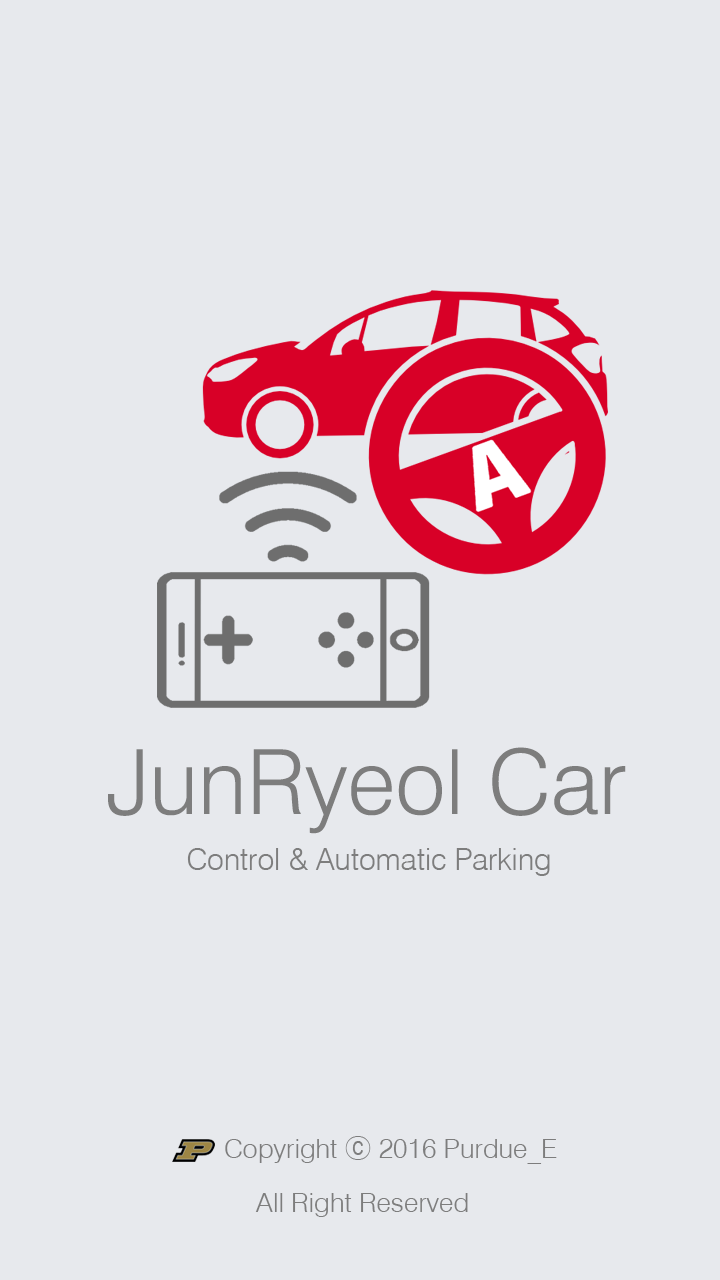
<style>
.page{position:relative;width:720px;height:1280px;background:#e7e9ed}
.page>*{position:absolute;margin:0}
.t1{font:90px "Swis721-BT";color:#7d7d7d}
.t2{font:30px "Swis721-BT";color:#7d7d7d}
.t3{font:27px "Swis721-BT";color:#7d7d7d}
.t4{font:27px "Gulim";color:#7d7d7d}
</style>
<div class="page">
<p class="t1" style="left:108px;top:747px;width:518px;height:87px">JunRyeol Car</p>
<p class="t2" style="left:187px;top:848px;width:363px;height:28px">Control &amp; Automatic Parking</p>
<p class="t3" style="left:225px;top:1136px;width:332px;height:28px">Copyright <span class="t4">ⓒ</span> 2016 Purdue_E</p>
<p class="t3" style="left:255px;top:1193px;width:213px;height:24px">All Right Reserved</p>
</div>
